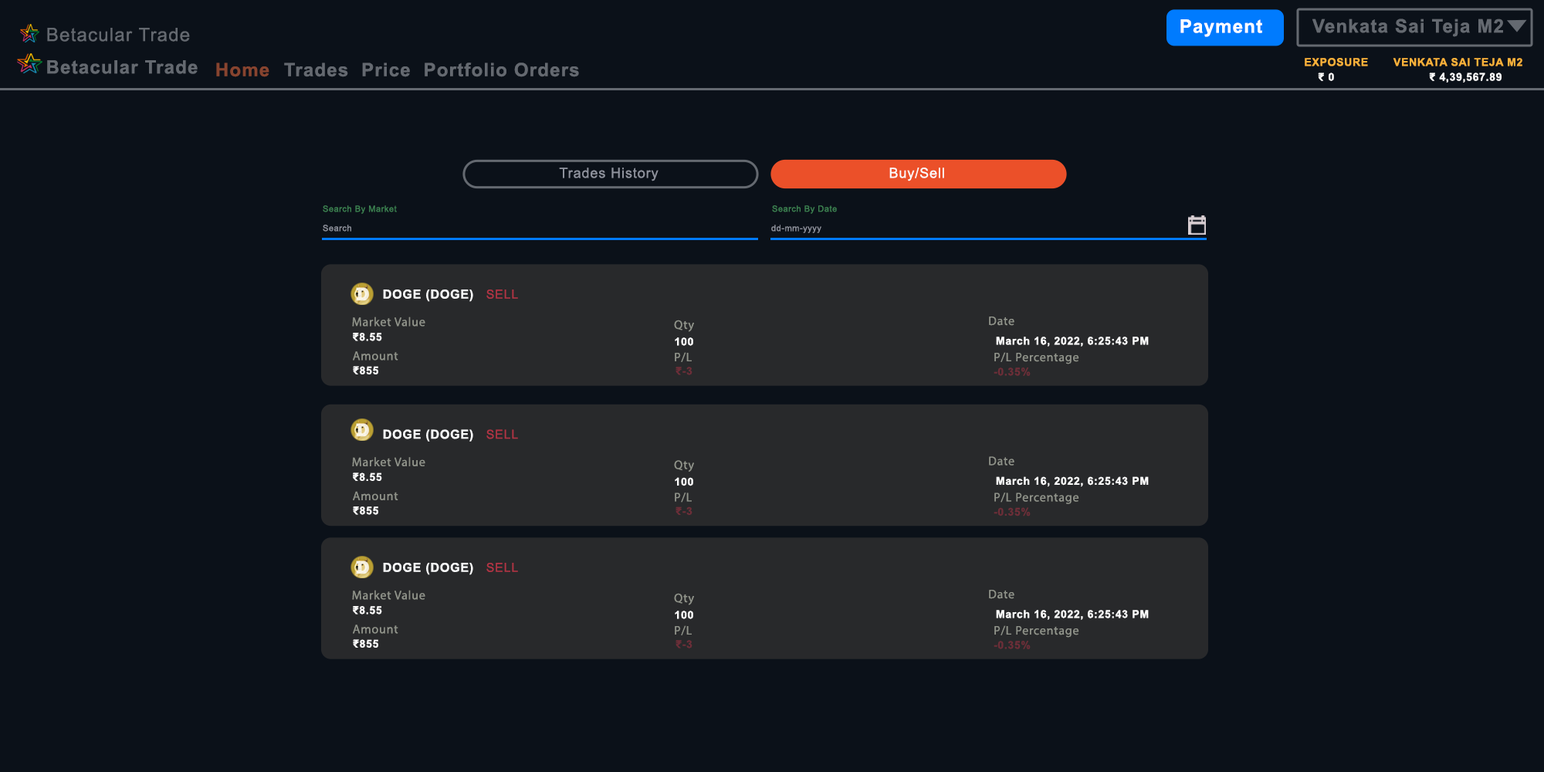
<style>
.page{position:relative;width:1544px;height:772px;background:#0b1119}
.page>*{position:absolute;margin:0}
.t1{font:18.5px "ArialMT";letter-spacing:0.05em;color:#646970}
.t2{font:18.5px "Arial-BoldMT";letter-spacing:0.05em;color:#ffffff}
.t3{font:18.5px "Arial-BoldMT";letter-spacing:0.05em;color:#646970}
.t4{font:18.5px "Arial-BoldMT";letter-spacing:0.05em;color:#87442f}
.t5{font:10.8px "Arial-BoldMT";letter-spacing:0.05em;color:#f9b23a}
.t6{font:10.8px "Arial-BoldMT";letter-spacing:0.05em;color:#fdfdfd}
.t7{font:13.9px "ArialMT";letter-spacing:0.05em;color:#8e929d}
.t8{font:13.9px "ArialMT";letter-spacing:0.05em;color:#fcfcfc}
.t9{font:8.5px "ArialMT";letter-spacing:0.05em;color:#3d8352}
.t10{font:8.5px "ArialMT";letter-spacing:0.05em;color:#8e929d}
.t11{font:12.4px "Arial-BoldMT";letter-spacing:0.05em;color:#f8f9fa}
.t12{font:12.4px "ArialMT";letter-spacing:0.05em;color:#b03444}
.t13{font:12.4px "MyriadPro-Regular";letter-spacing:0.05em;color:#90938a}
.t14{font:10.8px "Arial-BoldMT";letter-spacing:0.05em;color:#6c2e38}
</style>
<div class="page">
<p class="t1" style="left:47px;top:28px;width:143px;height:14px">Betacular Trade</p>
<p class="t2" style="left:1181px;top:19px;width:81px;height:18px">Payment</p>
<p class="t3" style="left:1313px;top:19px;width:190px;height:18px">Venkata Sai Teja M2</p>
<p class="t3" style="left:47px;top:60px;width:151px;height:14px">Betacular Trade</p>
<p class="t3" style="left:216px;top:63px;width:363px;height:14px"><span class="t4">Home</span>   Trades  Price  Portfolio Orders</p>
<p class="t5" style="left:1305px;top:58px;width:218px;height:8px">EXPOSURE       VENKATA SAI TEJA M2</p>
<p class="t6" style="left:1318px;top:73px;width:184px;height:10px">₹ 0     ₹ 4,39,567.89</p>
<p class="t7" style="left:559px;top:168px;width:100px;height:13px">Trades History</p>
<p class="t8" style="left:890px;top:168px;width:54px;height:13px">Buy/Sell</p>
<p class="t9" style="left:323px;top:205px;width:74px;height:9px">Search By Market</p>
<p class="t9" style="left:772px;top:205px;width:65px;height:9px">Search By Date</p>
<p class="t10" style="left:323px;top:225px;width:28px;height:7px">Search</p>
<p class="t10" style="left:771px;top:225px;width:51px;height:8px">dd-mm-yyyy</p>
<p class="t11" style="left:383px;top:290px;width:135px;height:12px">DOGE (DOGE)   <span class="t12">SELL</span></p>
<p class="t13" style="left:352px;top:317px;width:73px;height:10px">Market Value</p>
<p class="t13" style="left:989px;top:317px;width:26px;height:9px">Date</p>
<p class="t13" style="left:674px;top:320px;width:20px;height:12px">Qty</p>
<p class="t6" style="left:353px;top:333px;width:29px;height:8px">₹8.55</p>
<p class="t6" style="left:675px;top:337px;width:18px;height:9px">100</p>
<p class="t6" style="left:996px;top:337px;width:153px;height:10px">March 16, 2022, 6:25:43 PM</p>
<p class="t13" style="left:353px;top:351px;width:45px;height:10px">Amount</p>
<p class="t13" style="left:675px;top:352px;width:17px;height:10px">P/L</p>
<p class="t13" style="left:995px;top:352px;width:84px;height:12px">P/L Percentage</p>
<p class="t6" style="left:353px;top:366px;width:25px;height:8px">₹855</p>
<p class="t14" style="left:676px;top:367px;width:17px;height:8px">₹-3</p>
<p class="t14" style="left:994px;top:368px;width:37px;height:8px">-0.35%</p>
<p class="t11" style="left:383px;top:429px;width:135px;height:13px">DOGE (DOGE)   <span class="t12">SELL</span></p>
<p class="t13" style="left:352px;top:457px;width:73px;height:9px">Market Value</p>
<p class="t13" style="left:674px;top:460px;width:20px;height:12px">Qty</p>
<p class="t13" style="left:989px;top:456px;width:26px;height:10px">Date</p>
<p class="t6" style="left:353px;top:473px;width:29px;height:8px">₹8.55</p>
<p class="t6" style="left:675px;top:477px;width:18px;height:9px">100</p>
<p class="t6" style="left:996px;top:476px;width:153px;height:11px">March 16, 2022, 6:25:43 PM</p>
<p class="t13" style="left:353px;top:491px;width:45px;height:9px">Amount</p>
<p class="t13" style="left:675px;top:493px;width:17px;height:10px">P/L</p>
<p class="t13" style="left:995px;top:493px;width:84px;height:11px">P/L Percentage</p>
<p class="t6" style="left:353px;top:507px;width:25px;height:8px">₹855</p>
<p class="t14" style="left:676px;top:507px;width:17px;height:9px">₹-3</p>
<p class="t14" style="left:994px;top:507px;width:37px;height:10px">-0.35%</p>
<p class="t11" style="left:383px;top:563px;width:135px;height:12px">DOGE (DOGE)   <span class="t12">SELL</span></p>
<p class="t13" style="left:352px;top:590px;width:73px;height:10px">Market Value</p>
<p class="t13" style="left:674px;top:593px;width:20px;height:12px">Qty</p>
<p class="t13" style="left:989px;top:590px;width:26px;height:9px">Date</p>
<p class="t6" style="left:353px;top:606px;width:29px;height:9px">₹8.55</p>
<p class="t6" style="left:675px;top:611px;width:18px;height:8px">100</p>
<p class="t6" style="left:996px;top:610px;width:153px;height:10px">March 16, 2022, 6:25:43 PM</p>
<p class="t13" style="left:353px;top:625px;width:45px;height:9px">Amount</p>
<p class="t13" style="left:675px;top:625px;width:17px;height:10px">P/L</p>
<p class="t13" style="left:995px;top:625px;width:84px;height:13px">P/L Percentage</p>
<p class="t6" style="left:353px;top:639px;width:25px;height:9px">₹855</p>
<p class="t14" style="left:676px;top:640px;width:17px;height:9px">₹-3</p>
<p class="t14" style="left:994px;top:641px;width:37px;height:8px">-0.35%</p>
</div>
